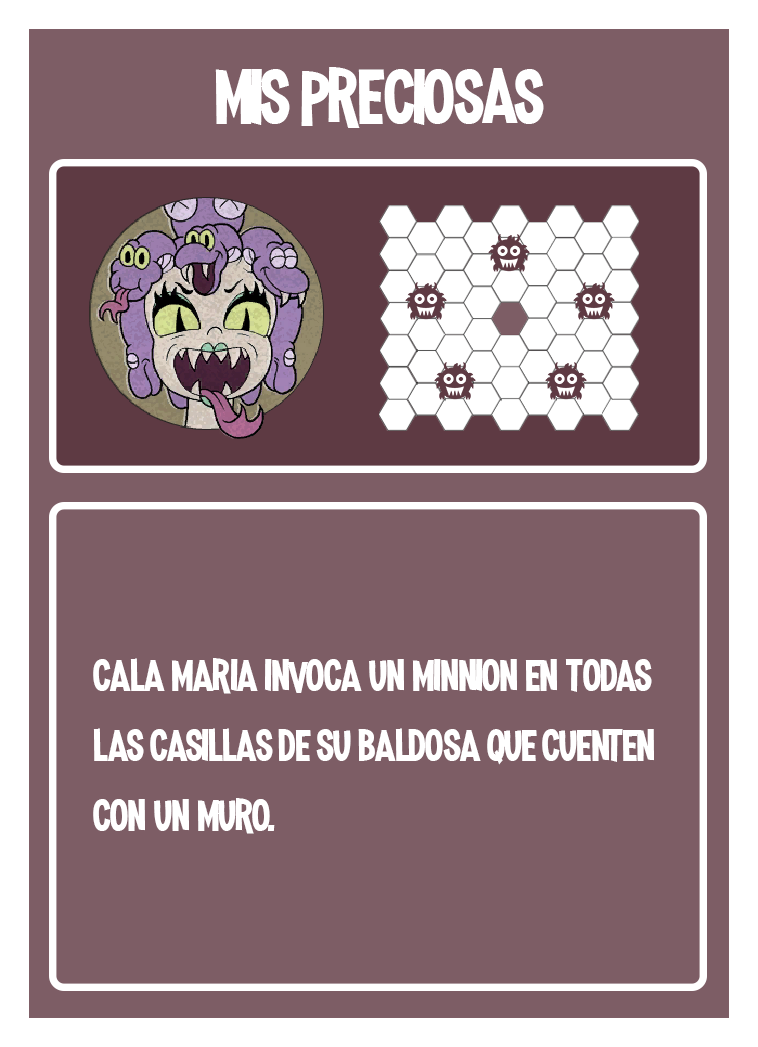
<style>
.page{position:relative;width:758px;height:1047px;background:#7d5d65}
.page>*{position:absolute;margin:0}
.t1{font:100px "MadnessHyperactive";color:#ffffff}
.t2{font:58.3px "MadnessHyperactive";color:#ffffff}
</style>
<div class="page">
<p class="t1" style="left:215px;top:67px;width:329px;height:61px">mis preciosas</p>
<p class="t2" style="left:93px;top:658px;width:561px;height:176px">cala maria invoca un minnion en todas las casillas de su baldosa que cuenten con un muro.</p>
</div>
